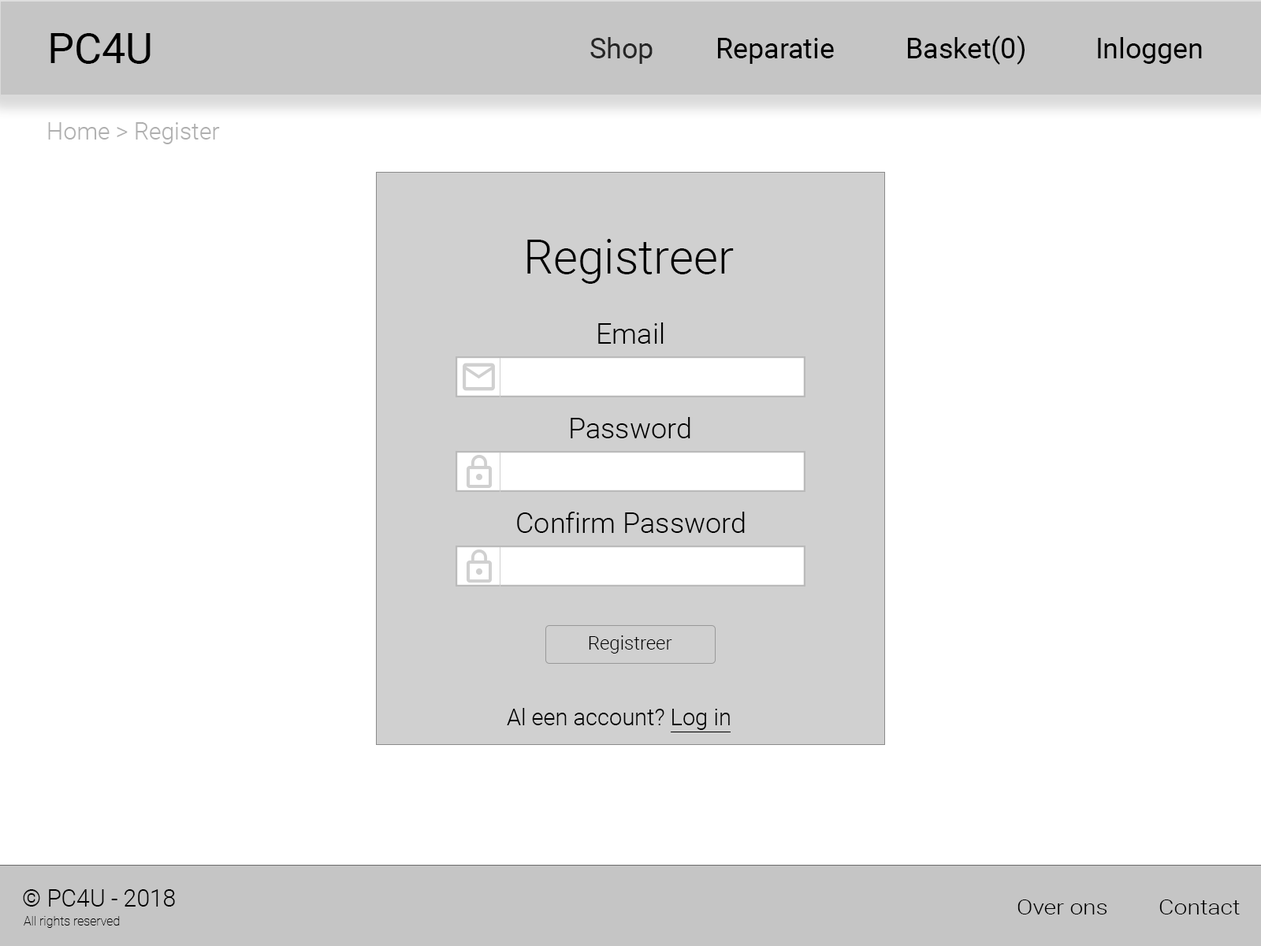
<style>
.page{position:relative;width:1261px;height:946px;background:#ffffff}
.page>*{position:absolute;margin:0}
.t1{font:42.1px "Roboto-Regular";color:#000000}
.t2{font:28px "Roboto-Regular";color:#000000}
.t3{font:28px "Roboto-Regular";color:#262626}
.t4{font:23.7px "Roboto-Light";color:#afafaf}
.t5{font:47.3px "Roboto-Light";color:#000000}
.t6{font:28.4px "Roboto-Light";color:#000000}
.t7{font:18.9px "Roboto-Light";color:#000000}
.t8{font:22.9px "Roboto-Light";color:#000000}
.t9{font:23.6px "Roboto-Light";color:#000000}
.t10{font:20.4px "Roboto-Light";color:#000000;scale:1.16 1}
.t11{font:12.6px "Roboto-Thin";color:#000000}
</style>
<div class="page">
<p class="t1" style="left:50px;top:33px;width:101px;height:31px">PC4U</p>
<p class="t2" style="left:590px;top:35px;width:612px;height:30px"><span class="t3">Shop</span>  Reparatie   Basket(0)   Inloggen</p>
<p class="t4" style="left:48px;top:122px;width:172px;height:22px">Home &gt; Register</p>
<p class="t5" style="left:527px;top:239px;width:207px;height:45px">Registreer</p>
<p class="t6" style="left:598px;top:322px;width:66px;height:22px">Email</p>
<p class="t6" style="left:571px;top:417px;width:119px;height:21px">Password</p>
<p class="t6" style="left:517px;top:511px;width:228px;height:22px">Confirm Password</p>
<p class="t7" style="left:589px;top:635px;width:83px;height:18px">Registreer</p>
<p class="t8" style="left:507px;top:708px;width:223px;height:22px">Al een account? Log in</p>
<p class="t9" style="left:23px;top:889px;width:152px;height:17px">© PC4U - 2018</p>
<p class="t10" style="left:1017px;top:899px;width:223px;height:15px">Over ons  Contact</p>
<p class="t11" style="left:24px;top:916px;width:96px;height:12px">All rights reserved</p>
</div>
